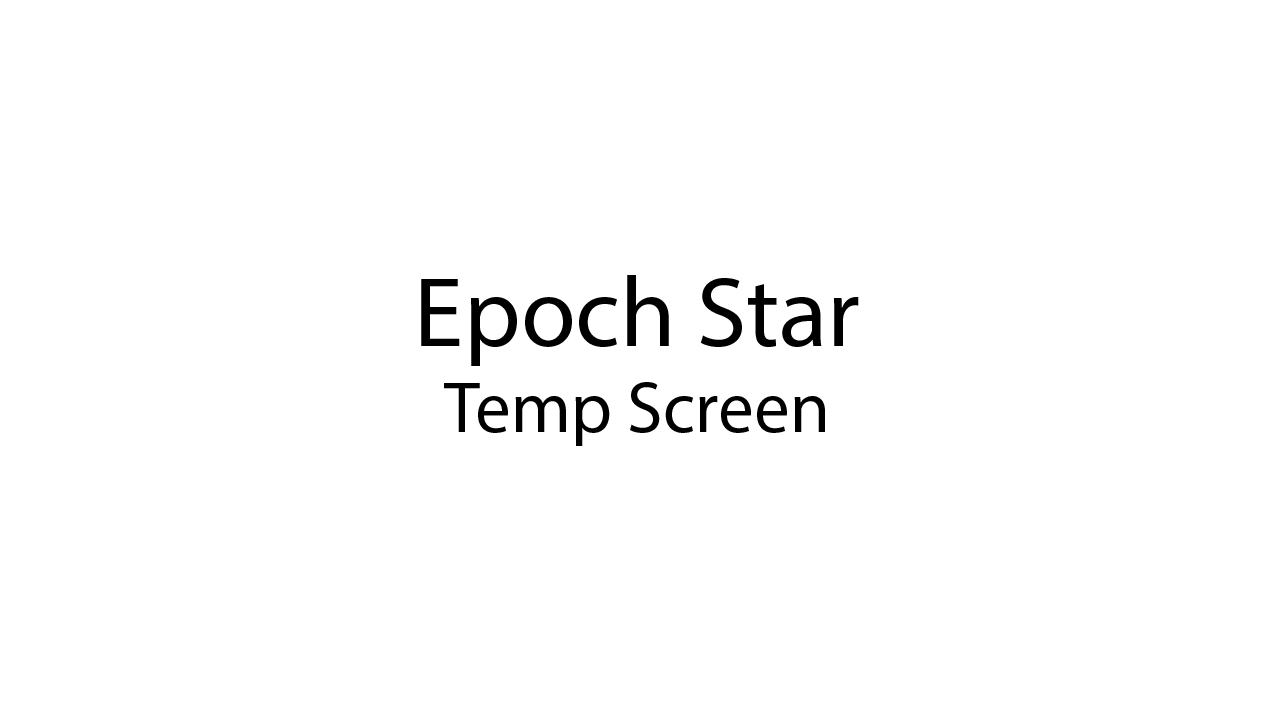
<style>
.page{position:relative;width:1280px;height:720px;background:#ffffff}
.page>*{position:absolute;margin:0}
.t1{font:72px "MyriadPro-Regular";color:#000000}
.t2{font:100px "MyriadPro-Regular";color:#000000}
</style>
<div class="page">
<p class="t1" style="left:421px;top:275px;width:438px;height:171px;text-align:center"><span class="t2">Epoch Star<br></span>Temp Screen</p>
</div>
